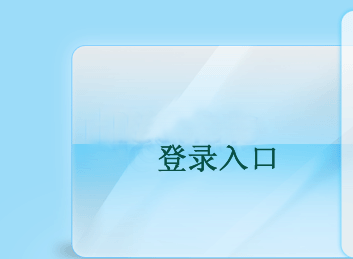
<style>
.page{position:relative;width:353px;height:259px}
.page>*{position:absolute;margin:0}
.t1{font:30px "SimSun";color:#085045;font-weight:bold}
</style>
<div class="page">
<p class="t1" style="left:158px;top:144px;width:118px;height:28px">登录入口</p>
</div>
